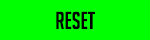
<style>
.page{position:relative;width:150px;height:40px;background:#00ff00}
.page>*{position:absolute;margin:0}
.t1{font:24px "BigNoodleTitling";color:#000000}
</style>
<div class="page">
<p class="t1" style="left:56px;top:11px;width:39px;height:18px">reset</p>
</div>
